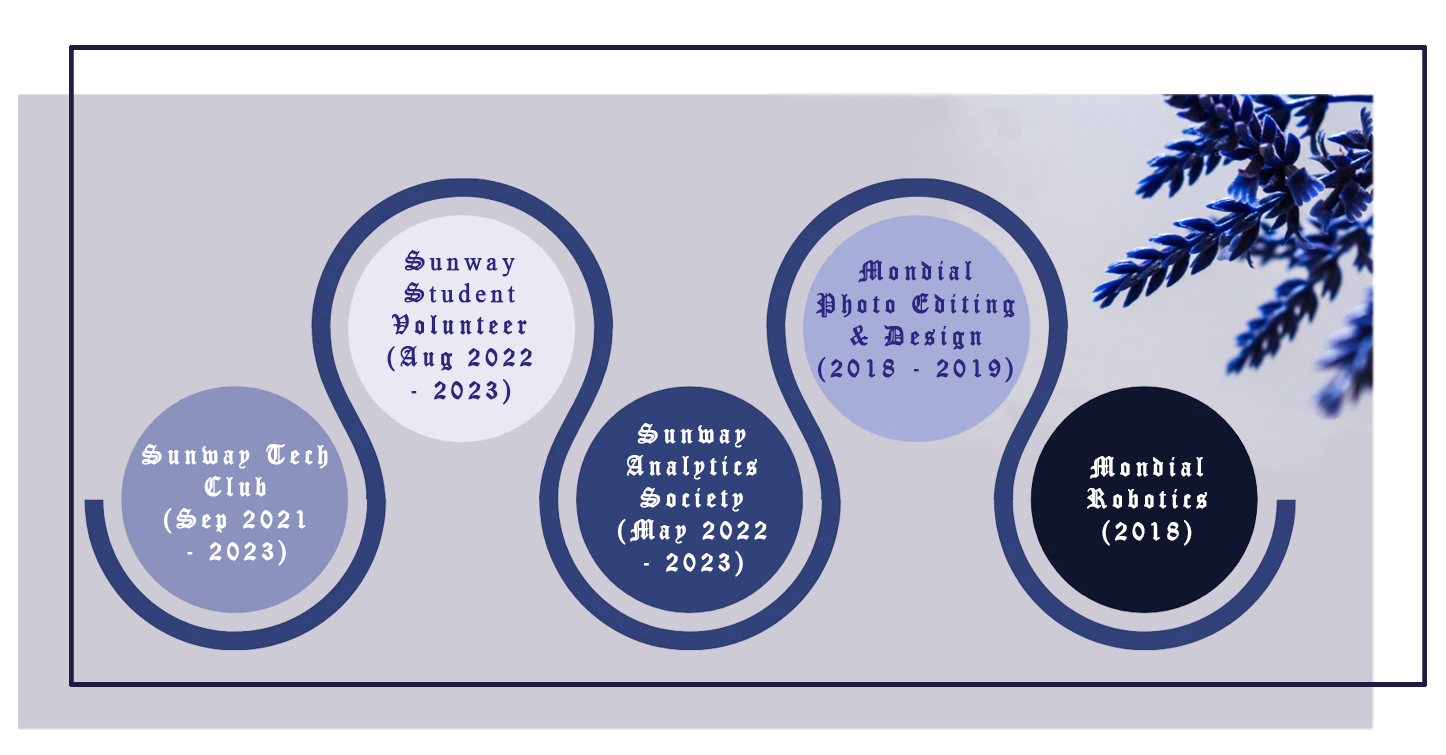
<style>
.page{position:relative;width:1446px;height:755px;background:#cdccd6}
.page>*{position:absolute;margin:0}
.t1{font:26.8px "OldEnglishTextMT";letter-spacing:0.18em;color:#2d2681;font-weight:bold;scale:0.9 1}
.t2{font:26.8px "OldEnglishTextMT";letter-spacing:0.18em;color:#2d2681;text-transform:uppercase;font-weight:bold;scale:0.9 1}
.t3{font:26.8px "TimesNewRomanPSMT";letter-spacing:0.18em;color:#2d2681;font-weight:bold;scale:0.9 1}
.t4{font:26.8px "OldEnglishTextMT";letter-spacing:0.18em;color:#ffffff;font-weight:bold;scale:0.9 1}
.t5{font:26.8px "OldEnglishTextMT";letter-spacing:0.18em;color:#ffffff;text-transform:uppercase;font-weight:bold;scale:0.9 1}
</style>
<div class="page">
<p class="t1" style="left:387px;top:250px;width:145px;height:155px;text-align:center"><span class="t2">S</span><span class="t3">unway<br></span><span class="t2">S</span><span class="t3">tudent<br></span>Volunteer<br>(Aug 2022<br>- 2023)</p>
<p class="t1" style="left:816px;top:260px;width:199px;height:123px;text-align:center"><span class="t2">M</span>ondial<br><span class="t2">P</span>hoto <span class="t2">E</span>diting<br>&amp; Design<br>(2018 - 2019)</p>
<p class="t4" style="left:618px;top:423px;width:149px;height:154px;text-align:center"><span class="t5">s</span>unway<br>Analytics<br>Society<br>(May 2022<br>- 2023)</p>
<p class="t4" style="left:141px;top:444px;width:187px;height:122px;text-align:center"><span class="t5">s</span>unway Tech<br>Club<br>(Sep 2021<br>- 2023)</p>
<p class="t4" style="left:1087px;top:456px;width:120px;height:90px;text-align:center"><span class="t5">M</span>ondial<br>Robotics<br>(2018)</p>
</div>
